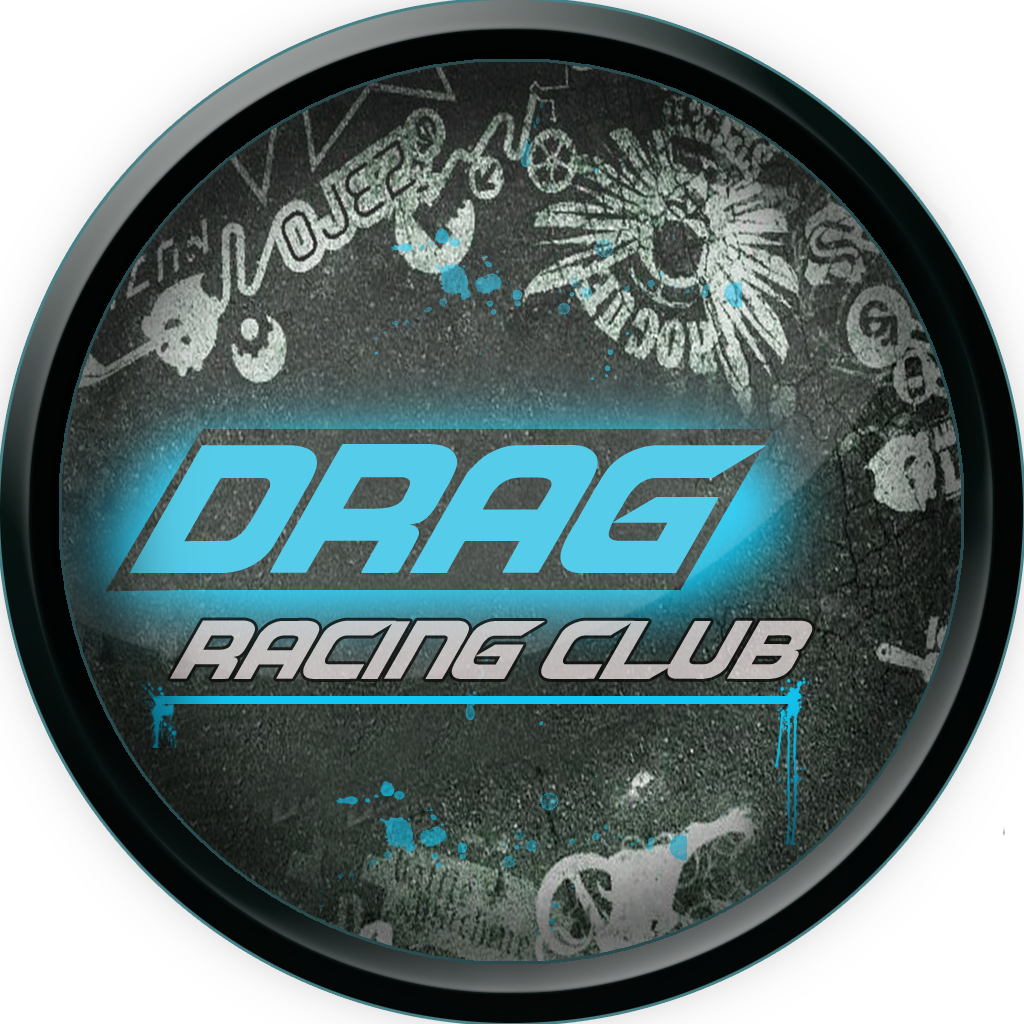
<style>
.page{position:relative;width:1024px;height:1024px}
.page>*{position:absolute;margin:0}
.t1{font:198px "NFSfont";color:#55cce9}
.t2{font:90px "NFSfont";color:#c1bebe}
</style>
<div class="page">
<p class="t1" style="left:129px;top:444px;width:637px;height:129px">Drag</p>
<p class="t2" style="left:170px;top:620px;width:643px;height:59px">racing club</p>
</div>
